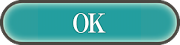
<style>
.page{position:relative;width:180px;height:45px}
.page>*{position:absolute;margin:0}
.t1{font:26px "RyuminPro-ExBold";letter-spacing:-0.08em;color:#ffffff;scale:0.9 1}
</style>
<div class="page">
<p class="t1" style="left:73px;top:13px;width:33px;height:20px">OK</p>
</div>
